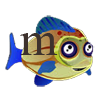
<style>
.page{position:relative;width:100px;height:100px;background:#ffffff}
.page>*{position:absolute;margin:0}
.t1{font:48px "TimesNewRomanPSMT";color:#3d322d}
</style>
<div class="page">
<p class="t1" style="left:20px;top:33px;width:38px;height:22px">m</p>
</div>
